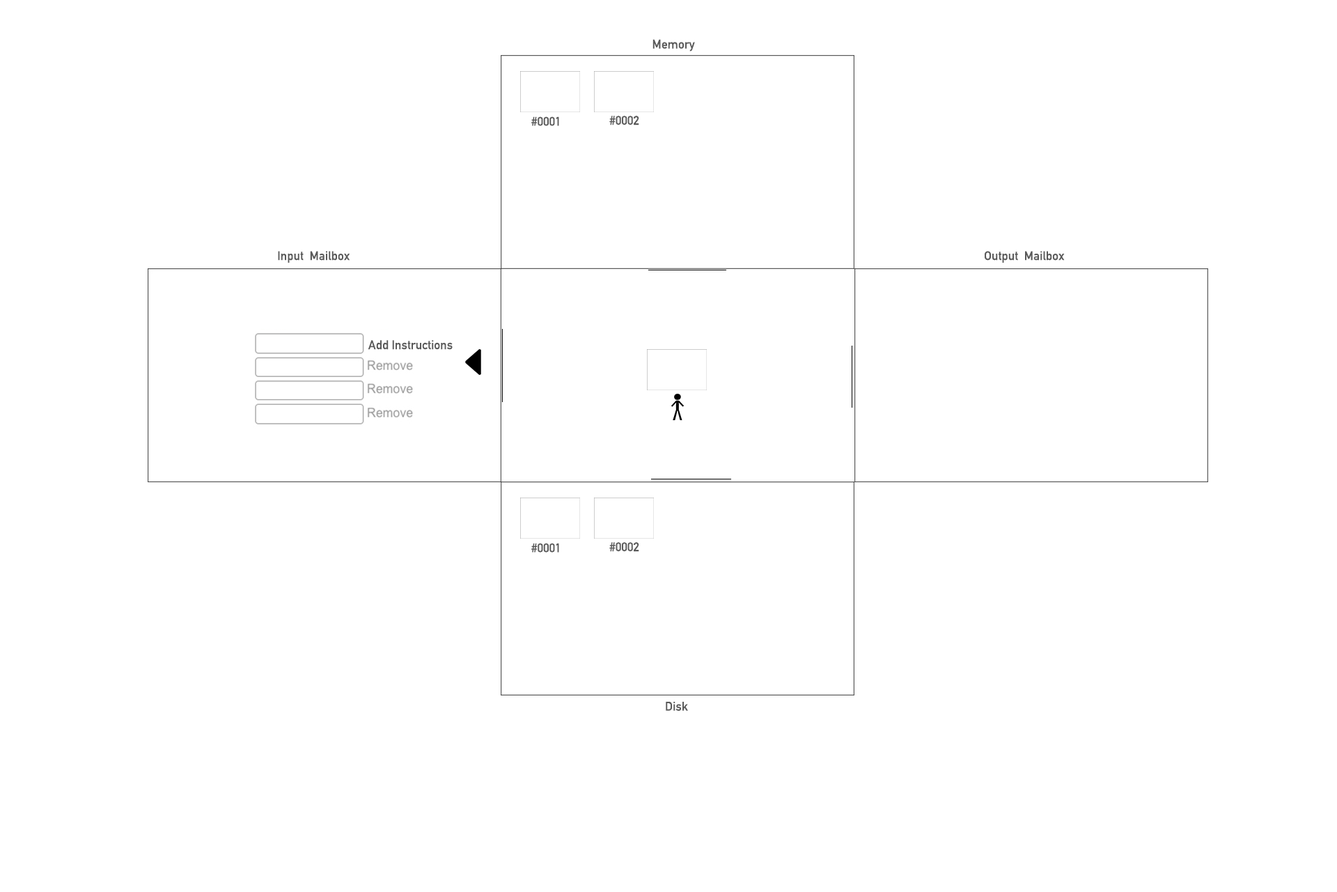
<style>
.page{position:relative;width:1337px;height:892px;background:#ffffff}
.page>*{position:absolute;margin:0}
.t1{font:12.4px "DINAlternate-Bold";color:#5a5a5a}
</style>
<div class="page">
<p class="t1" style="left:653px;top:39px;width:42px;height:13px">Memory</p>
<p class="t1" style="left:531px;top:116px;width:28px;height:10px">#0001</p>
<p class="t1" style="left:609px;top:116px;width:30px;height:9px">#0002</p>
<p class="t1" style="left:278px;top:251px;width:72px;height:12px">Input  Mailbox</p>
<p class="t1" style="left:985px;top:251px;width:80px;height:12px">Output  Mailbox</p>
<p class="t1" style="left:368px;top:340px;width:85px;height:10px">Add Instructions</p>
<p class="t1" style="left:531px;top:543px;width:28px;height:9px">#0001</p>
<p class="t1" style="left:609px;top:542px;width:30px;height:10px">#0002</p>
<p class="t1" style="left:666px;top:701px;width:22px;height:9px">Disk</p>
</div>
